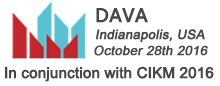
<style>
.page{position:relative;width:220px;height:86px;background:#ffffff}
.page>*{position:absolute;margin:0}
.t1{font:18px "MicrosoftYaHei";color:#474747;font-weight:bold}
.t2{font:13px "ArialMT";color:#474747;font-weight:bold;font-style:italic}
.t3{font:15px "ArialMT";letter-spacing:-0.01em;color:#474747;font-weight:bold}
</style>
<div class="page">
<p class="t1" style="left:96px;top:8px;width:52px;height:15px">DAVA</p>
<p class="t2" style="left:96px;top:29px;width:109px;height:13px">Indianapolis, USA</p>
<p class="t2" style="left:94px;top:45px;width:114px;height:11px">October 28th 2016</p>
<p class="t3" style="left:5px;top:66px;width:209px;height:16px">In conjunction with CIKM 2016</p>
</div>
